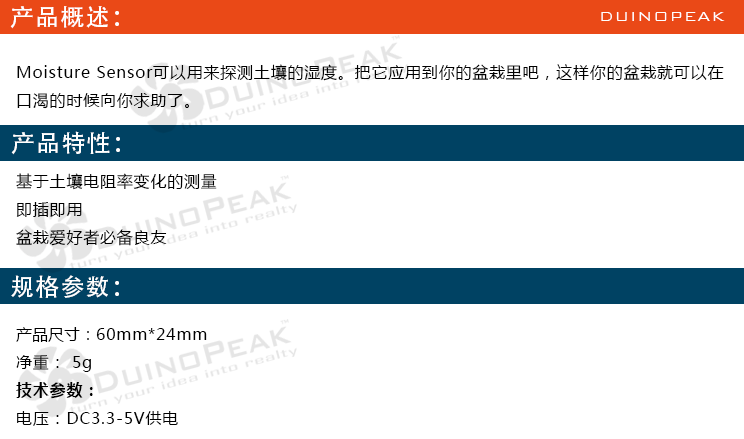
<style>
.page{position:relative;width:744px;height:439px;background:#ffffff}
.page>*{position:absolute;margin:0}
.t1{font:24px "AdobeHeitiStd-Regular";letter-spacing:0.05em;color:#ffffff}
.t2{font:18px "BankGothicBT-Light";letter-spacing:0.05em;color:#ffffff}
.t3{font:16px "MicrosoftYaHei";letter-spacing:0.05em;color:#000000}
.t4{font:16px "MicrosoftYaHei";color:#000000}
.t5{font:16px "MicrosoftYaHei-Bold";letter-spacing:0.05em;color:#000000}
</style>
<div class="page">
<p class="t1" style="left:10px;top:6px;width:109px;height:23px">产品概述：</p>
<p class="t2" style="left:601px;top:12px;width:124px;height:9px">DUINOPEAK</p>
<p class="t3" style="left:17px;top:64px;width:707px;height:45px">Moisture Sensor可以用来探测土壤的湿度。把它应用到你的盆栽里吧，这样你的盆栽就可以在<br>口渴的时候向你求助了。</p>
<p class="t1" style="left:11px;top:131px;width:109px;height:24px">产品特性：</p>
<p class="t3" style="left:16px;top:173px;width:201px;height:73px">基于土壤电阻率变化的测量<br>即插即用<br>盆栽爱好者必备良友</p>
<p class="t1" style="left:11px;top:275px;width:108px;height:23px">规格参数：</p>
<p class="t3" style="left:16px;top:327px;width:191px;height:99px"><span class="t4">产品尺寸：</span>60mm*24mm<br>净重： 5g<br><span class="t5">技术参数：<br></span>电压：DC3.3-5V供电</p>
</div>
